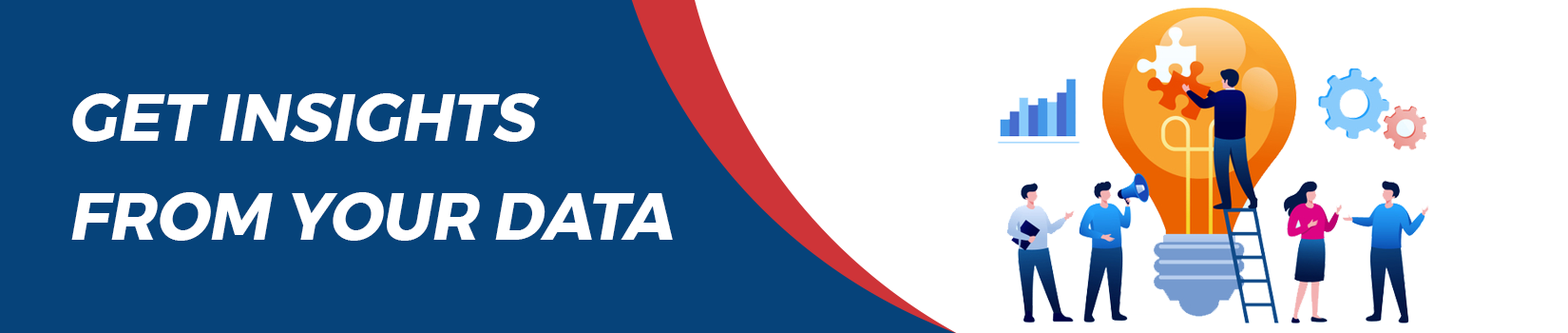
<style>
.page{position:relative;width:1568px;height:333px;background:#06437a}
.page>*{position:absolute;margin:0}
.t1{font:65.6px/98.4px "Montserrat-Bold";color:#ffffff;text-transform:uppercase;font-style:italic}
</style>
<div class="page">
<p class="t1" style="left:71px;top:93px;width:602px;height:147px">Get INSIGHTS <br>FROM YOUR DATA</p>
</div>
